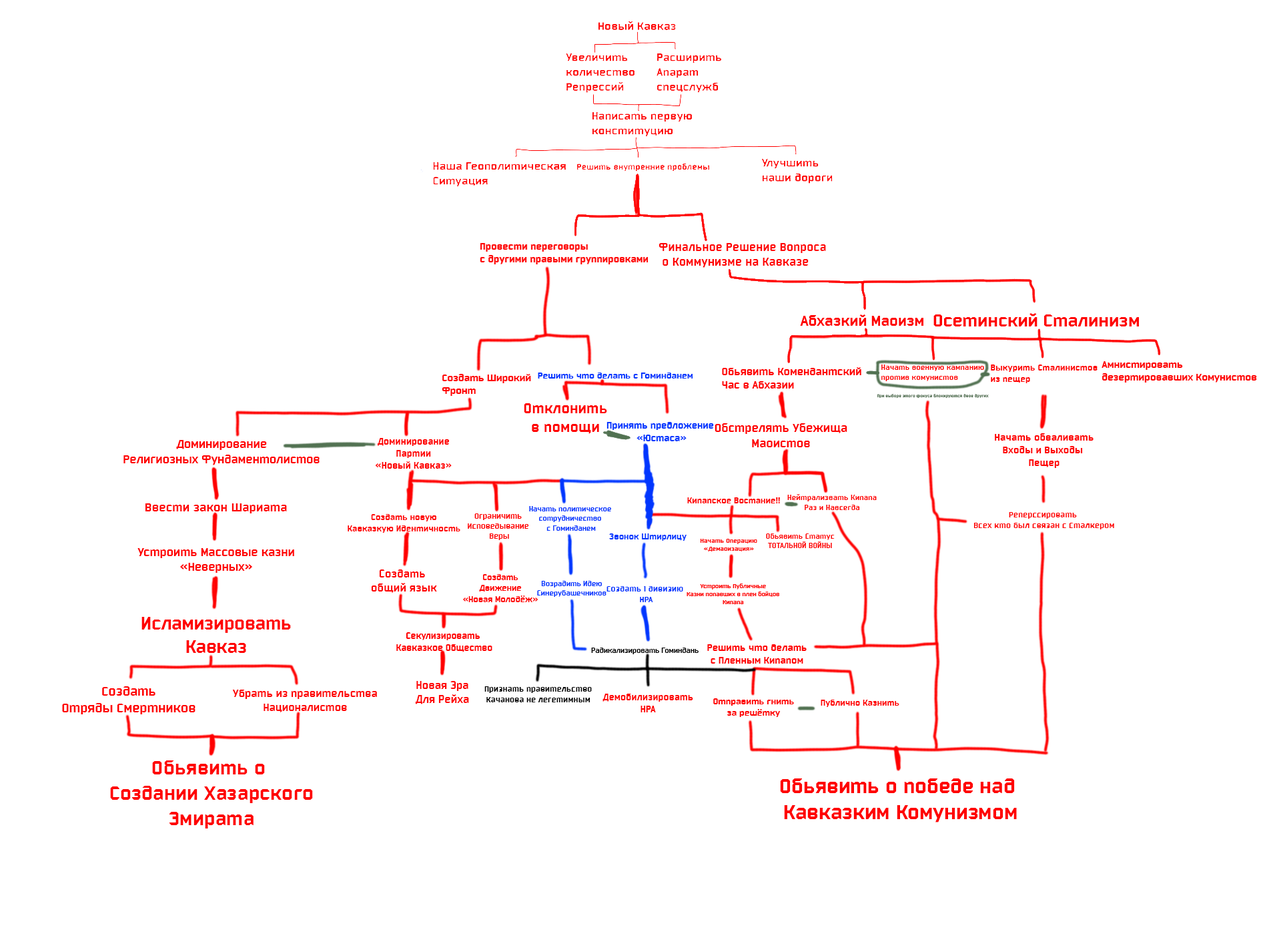
<style>
.page{position:relative;width:1261px;height:946px;background:#ffffff}
.page>*{position:absolute;margin:0}
.t1{font:12.5px "Bombardier";color:#ff0000;scale:1.09 1}
.t2{font:15.9px "Bombardier";color:#ff0000;scale:1.09 1}
.t3{font:18.9px "Bombardier";color:#ff0000;scale:1.09 1}
.t4{font:8.2px "Bombardier";color:#ff0000;scale:1.09 1}
.t5{font:9.4px "Bombardier";color:#ff0000;scale:1.09 1}
.t6{font:10.7px "Bombardier";color:#ff0000;scale:1.09 1}
.t7{font:9.6px "Bombardier";color:#0036ff;scale:1.09 1}
.t8{font:11.5px "Bombardier";color:#ff0000;scale:1.09 1}
.t9{font:4.5px "Bombardier";color:#517151;scale:1.09 1}
.t10{font:15.5px "Bombardier";color:#ff0000;scale:1.09 1}
.t11{font:10.2px "Bombardier";color:#0036ff;scale:1.09 1}
.t12{font:12.7px "Bombardier";color:#ff0000;scale:1.09 1}
.t13{font:10px "Bombardier";color:#ff0000;scale:1.09 1}
.t14{font:10.6px "Bombardier";color:#ff0000;scale:1.09 1}
.t15{font:12.6px "Bombardier";color:#ff0000;scale:1.09 1}
.t16{font:9.2px "Bombardier";color:#ff0000;scale:1.09 1}
.t17{font:13px "Bombardier";color:#ff0000;scale:1.09 1}
.t18{font:7.9px "Bombardier";color:#0036ff;scale:1.09 1}
.t19{font:9.3px "Bombardier";color:#ff0000;scale:1.09 1}
.t20{font:8.5px "Bombardier";color:#ff0000;scale:1.09 1}
.t21{font:8.8px "Bombardier";color:#ff0000;scale:1.09 1}
.t22{font:9.2px "Bombardier";color:#0036ff;scale:1.09 1}
.t23{font:8.1px "Bombardier";color:#ff0000;scale:1.09 1}
.t24{font:6.9px "Bombardier";color:#ff0000;scale:1.09 1}
.t25{font:11.8px "Bombardier";color:#ff0000;scale:1.09 1}
.t26{font:9px "Bombardier";color:#ff0000;scale:1.09 1}
.t27{font:8.8px "Bombardier";color:#0036ff;scale:1.09 1}
.t28{font:6.5px "Bombardier";color:#ff0000;scale:1.09 1}
.t29{font:19.3px "Bombardier";color:#ff0000;scale:1.09 1}
.t30{font:9.7px "Bombardier";color:#ff0000;scale:1.09 1}
.t31{font:7.7px "Bombardier";color:#000000;scale:1.09 1}
.t32{font:10.3px "Bombardier";color:#ff0000;scale:1.09 1}
.t33{font:13.9px "Bombardier";color:#ff0000;scale:1.09 1}
.t34{font:11.6px "Bombardier";color:#ff0000;scale:1.09 1}
.t35{font:11.7px "Bombardier";color:#ff0000;scale:1.09 1}
.t36{font:8.8px "Bombardier";color:#000000;scale:1.09 1}
.t37{font:10.1px "Bombardier";color:#ff0000;scale:1.09 1}
.t38{font:9.6px "Bombardier";color:#ff0000;scale:1.09 1}
.t39{font:21.1px "Bombardier";color:#ff0000;scale:1.09 1}
.t40{font:21.8px "Bombardier";color:#ff0000;scale:1.09 1}
</style>
<div class="page">
<p class="t1" style="left:659px;top:243px;width:167px;height:25px">Финальное Решение Вопроса<br> о Коммунизме на Кавказе</p>
<p class="t2" style="left:800px;top:314px;width:124px;height:12px">Абхазкий Маоизм</p>
<p class="t3" style="left:934px;top:313px;width:205px;height:13px">Осетинский Сталинизм</p>
<p class="t4" style="left:881px;top:364px;width:103px;height:17px">Начать военную кампанию <br>против комунистов</p>
<p class="t5" style="left:991px;top:364px;width:107px;height:19px">Выкурить Сталинистов <br>из пещер</p>
<p class="t6" style="left:1102px;top:361px;width:155px;height:21px">Амнистировать <br>дезертировавших Комунистов</p>
<p class="t6" style="left:442px;top:374px;width:89px;height:22px">Создать Широкий<br>Фронт</p>
<p class="t7" style="left:538px;top:372px;width:155px;height:6px">Решить что делать с Гоминданем</p>
<p class="t8" style="left:722px;top:367px;width:139px;height:21px">Обьявить Комендантский<br>Час в Абхазии</p>
<p class="t9" style="left:877px;top:394px;width:112px;height:4px">При выборе этого фокуса блокируются двое других</p>
<p class="t10" style="left:524px;top:403px;width:83px;height:31px;text-align:center">Отклонить<br>в помощи</p>
<p class="t11" style="left:607px;top:422px;width:107px;height:19px;text-align:center">Принять предложение<br> «Юстаса»</p>
<p class="t12" style="left:715px;top:423px;width:132px;height:24px;text-align:center">Обстрелять Убежища<br>Маоистов</p>
<p class="t13" style="left:375px;top:438px;width:77px;height:30px;text-align:center">Доминирование<br>Партии<br>«Новый Кавказ»</p>
<p class="t14" style="left:995px;top:433px;width:99px;height:35px;text-align:center">Начать обваливать<br>Входы и Выходы <br>Пещер</p>
<p class="t15" style="left:123px;top:440px;width:197px;height:25px;text-align:center">Доминирование<br>Религиозных Фундаментолистов</p>
<p class="t16" style="left:687px;top:497px;width:93px;height:6px">Кипапское Востание!!</p>
<p class="t4" style="left:787px;top:494px;width:90px;height:16px;text-align:center">Нейтрализвать Кипапа<br>Раз и Навсегда</p>
<p class="t17" style="left:145px;top:503px;width:142px;height:10px">Ввести закон Шариата</p>
<p class="t18" style="left:529px;top:506px;width:82px;height:24px;text-align:center">Начать политическое<br>сотрудничество<br> с Гоминданем</p>
<p class="t19" style="left:348px;top:514px;width:112px;height:18px;text-align:center">Создать новую<br>Кавказкую Идентичность</p>
<p class="t20" style="left:468px;top:513px;width:61px;height:27px;text-align:center">Ограничить <br>Исповедывание <br>Веры</p>
<p class="t21" style="left:974px;top:512px;width:140px;height:17px;text-align:center">Реперссировать <br>Всех кто был связан с Сталкером</p>
<p class="t22" style="left:609px;top:533px;width:78px;height:7px">Звонок Штирлицу</p>
<p class="t23" style="left:766px;top:533px;width:69px;height:15px;text-align:center">Обьявить Статус<br>ТОТАЛЬНОЙ ВОЙНЫ</p>
<p class="t24" style="left:700px;top:538px;width:57px;height:13px;text-align:center">Начать Операцию<br>«Демаоизация»</p>
<p class="t15" style="left:137px;top:548px;width:157px;height:25px;text-align:center">Устроить Массовые казни<br>«Неверных»</p>
<p class="t25" style="left:371px;top:569px;width:66px;height:24px;text-align:center">Создать <br>общий язык</p>
<p class="t26" style="left:462px;top:574px;width:76px;height:28px;text-align:center">Создать<br>Движение<br>«Новая Молодёж»</p>
<p class="t18" style="left:537px;top:581px;width:70px;height:16px;text-align:center">Возрадить Идею<br>Синерубашечников</p>
<p class="t27" style="left:607px;top:586px;width:76px;height:16px;text-align:center">Создать 1 дивизию <br>НРА</p>
<p class="t28" style="left:687px;top:583px;width:92px;height:21px;text-align:center">Устроить Публичные<br>Казни попавших в плен бойцов<br>Кипапа</p>
<p class="t29" style="left:141px;top:617px;width:150px;height:36px;text-align:center">Исламизировать<br>Кавказ</p>
<p class="t30" style="left:396px;top:632px;width:96px;height:20px;text-align:center">Секулизировать <br>Кавказкое Общество</p>
<p class="t31" style="left:591px;top:647px;width:108px;height:7px">Радикализировать Гоминдань</p>
<p class="t32" style="left:707px;top:644px;width:100px;height:19px;text-align:center">Решить что делать<br>с Пленным Кипапом</p>
<p class="t33" style="left:62px;top:686px;width:134px;height:28px;text-align:center">Создать<br>Отряды Смертников</p>
<p class="t34" style="left:232px;top:689px;width:145px;height:23px;text-align:center">Убрать из правительства<br>Националистов</p>
<p class="t35" style="left:415px;top:681px;width:54px;height:23px;text-align:center">Новая Эра<br>Для Рейха</p>
<p class="t36" style="left:484px;top:686px;width:108px;height:16px;text-align:center">Признать правительство<br>Качанова не легетимным</p>
<p class="t37" style="left:603px;top:693px;width:90px;height:19px;text-align:center">Демобилизировать<br>НРА</p>
<p class="t38" style="left:713px;top:698px;width:81px;height:19px;text-align:center">Отправить гнить<br>за решётку</p>
<p class="t16" style="left:821px;top:699px;width:78px;height:8px">Публично Казнить</p>
<p class="t39" style="left:110px;top:760px;width:203px;height:68px;text-align:center">Обьявить о <br>Создании Хазарского<br>Эмирата</p>
<p class="t40" style="left:780px;top:778px;width:237px;height:44px;text-align:center">Обьявить о победе над <br>Кавказким Комунизмом</p>
</div>
